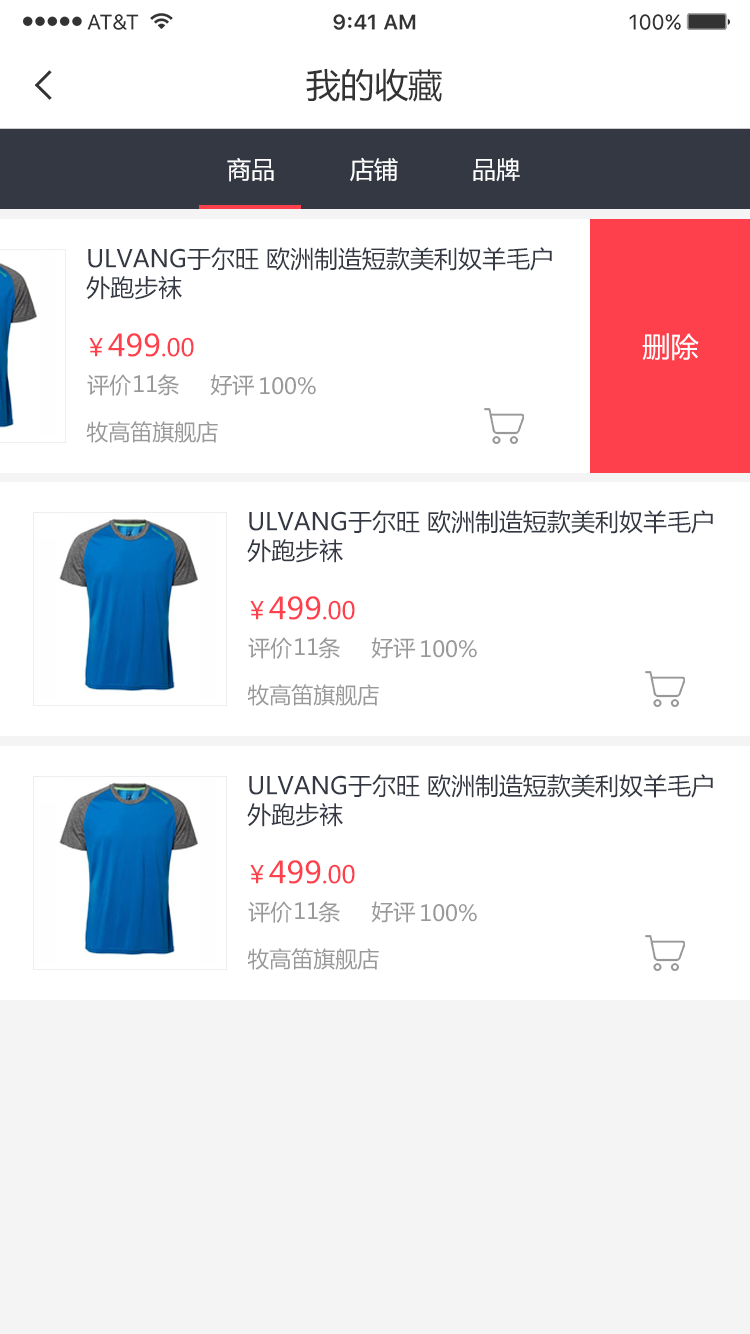
<style>
.page{position:relative;width:750px;height:1334px;background:#ffffff}
.page>*{position:absolute;margin:0}
.t1{font:34px "MicrosoftYaHei";color:#333333}
.t2{font:24px "MicrosoftYaHei";color:#ffffff}
.t3{font:24px "MicrosoftYaHei";color:#343843}
.t4{font:30px "MicrosoftYaHei";color:#fe404c}
.t5{font:24px "MicrosoftYaHei";color:#fe404c}
.t6{font:28px "MicrosoftYaHei";color:#ffffff}
.t7{font:22px "MicrosoftYaHei";color:#999999}
</style>
<div class="page">
<p class="t1" style="left:306px;top:68px;width:136px;height:34px">我的收藏</p>
<p class="t2" style="left:227px;top:158px;width:47px;height:24px">商品</p>
<p class="t2" style="left:350px;top:157px;width:48px;height:25px">店铺</p>
<p class="t2" style="left:473px;top:158px;width:47px;height:24px">品牌</p>
<p class="t3" style="left:86px;top:247px;width:466px;height:53px">ULVANG于尔旺 欧洲制造短款美利奴羊毛户外跑步袜</p>
<p class="t4" style="left:89px;top:333px;width:105px;height:24px"><span class="t5">￥</span>499<span class="t5">.00</span></p>
<p class="t6" style="left:642px;top:333px;width:57px;height:28px">删除</p>
<p class="t7" style="left:87px;top:374px;width:92px;height:22px">评价    条</p>
<p class="t7" style="left:134px;top:375px;width:23px;height:17px">11</p>
<p class="t7" style="left:210px;top:374px;width:44px;height:22px">好评</p>
<p class="t7" style="left:260px;top:377px;width:56px;height:18px">100%</p>
<p class="t7" style="left:86px;top:421px;width:132px;height:22px">牧高笛旗舰店</p>
<p class="t3" style="left:247px;top:510px;width:466px;height:53px">ULVANG于尔旺 欧洲制造短款美利奴羊毛户外跑步袜</p>
<p class="t4" style="left:250px;top:596px;width:105px;height:24px"><span class="t5">￥</span>499<span class="t5">.00</span></p>
<p class="t7" style="left:248px;top:637px;width:92px;height:22px">评价    条</p>
<p class="t7" style="left:295px;top:638px;width:23px;height:17px">11</p>
<p class="t7" style="left:371px;top:637px;width:44px;height:22px">好评</p>
<p class="t7" style="left:421px;top:640px;width:56px;height:18px">100%</p>
<p class="t7" style="left:247px;top:684px;width:132px;height:22px">牧高笛旗舰店</p>
<p class="t3" style="left:247px;top:774px;width:466px;height:53px">ULVANG于尔旺 欧洲制造短款美利奴羊毛户外跑步袜</p>
<p class="t4" style="left:250px;top:860px;width:105px;height:24px"><span class="t5">￥</span>499<span class="t5">.00</span></p>
<p class="t7" style="left:248px;top:901px;width:92px;height:22px">评价    条</p>
<p class="t7" style="left:295px;top:902px;width:23px;height:17px">11</p>
<p class="t7" style="left:371px;top:901px;width:44px;height:22px">好评</p>
<p class="t7" style="left:421px;top:904px;width:56px;height:18px">100%</p>
<p class="t7" style="left:247px;top:948px;width:132px;height:22px">牧高笛旗舰店</p>
</div>
